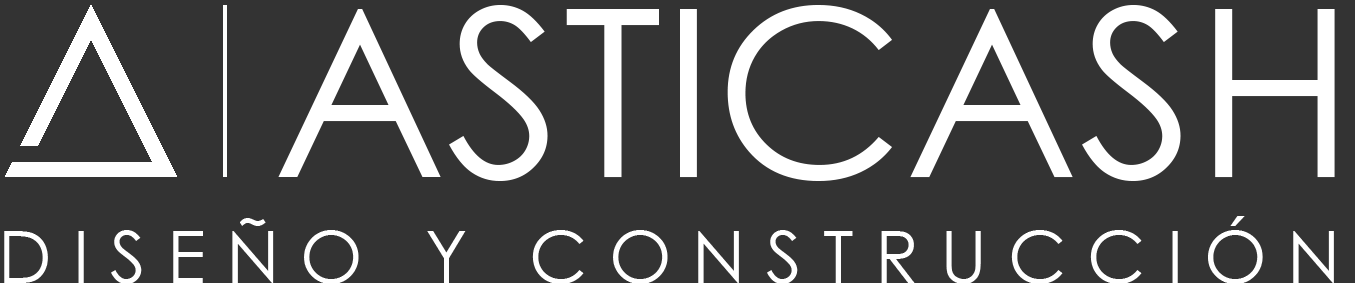
<style>
.page{position:relative;width:1355px;height:283px;background:#333333}
.page>*{position:absolute;margin:0}
.t1{font:234px "CenturyGothic";color:#ffffff}
.t2{font:72px "CenturyGothic";letter-spacing:0.291em;color:#ffffff}
</style>
<div class="page">
<p class="t1" style="left:278px;top:5px;width:1057px;height:176px">ASTICASH</p>
<p class="t2" style="left:4px;top:216px;width:1330px;height:68px">DISEÑO Y CONSTRUCCIÓN</p>
</div>
